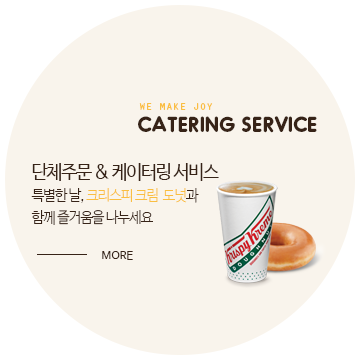
<style>
.page{position:relative;width:360px;height:360px;background:#f9f4ec}
.page>*{position:absolute;margin:0}
.t1{font:12.5px "OratorStd";color:#fabe41;scale:0.9 1}
.t2{font:22.2px "Oduda-Bold";color:#372317}
.t3{font:19.4px/33.3px "NanumBarunGothic";letter-spacing:-0.05em;color:#372317;scale:0.9 1}
.t4{font:15.3px/22.2px "NanumBarunGothicLight";letter-spacing:-0.05em;color:#372317;scale:0.9 1}
.t5{font:15.3px/22.2px "NanumBarunGothicLight";letter-spacing:-0.05em;color:#fabe41;scale:0.9 1}
.t6{font:11.1px "NanumBarunGothic";color:#372317}
</style>
<div class="page">
<p class="t1" style="left:139px;top:103px;width:74px;height:7px">we make joy</p>
<p class="t2" style="left:138px;top:116px;width:179px;height:17px">CATERING SERVICE</p>
<p class="t3" style="left:31px;top:163px;width:188px;height:62px">단체주문 &amp; 케이터링 서비스<br><span class="t4">특별한 날, </span><span class="t5">크리스피 크림  도넛</span><span class="t4">과 <br>함께 즐거움을 나누세요</span></p>
<p class="t6" style="left:102px;top:251px;width:31px;height:9px">MORE</p>
</div>
